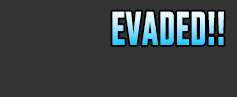
<style>
.page{position:relative;width:237px;height:97px;background:#333333}
.page>*{position:absolute;margin:0}
.t1{font:51.9px "Teko-Semibold";font-weight:bold;scale:0.64 1}
</style>
<div class="page">
<p class="t1" style="left:112px;top:11px;width:112px;height:34px">EVADED!!</p>
</div>
